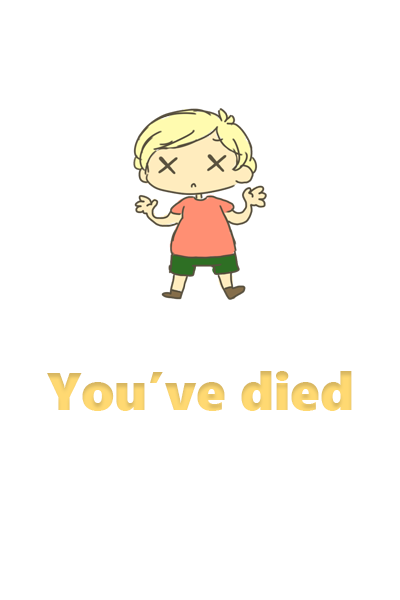
<style>
.page{position:relative;width:400px;height:600px;background:#ffffff}
.page>*{position:absolute;margin:0}
.t1{font:52.7px "SegoeUIBlack";color:#ffd972}
</style>
<div class="page">
<p class="t1" style="left:47px;top:371px;width:305px;height:40px">You’ve died</p>
</div>
